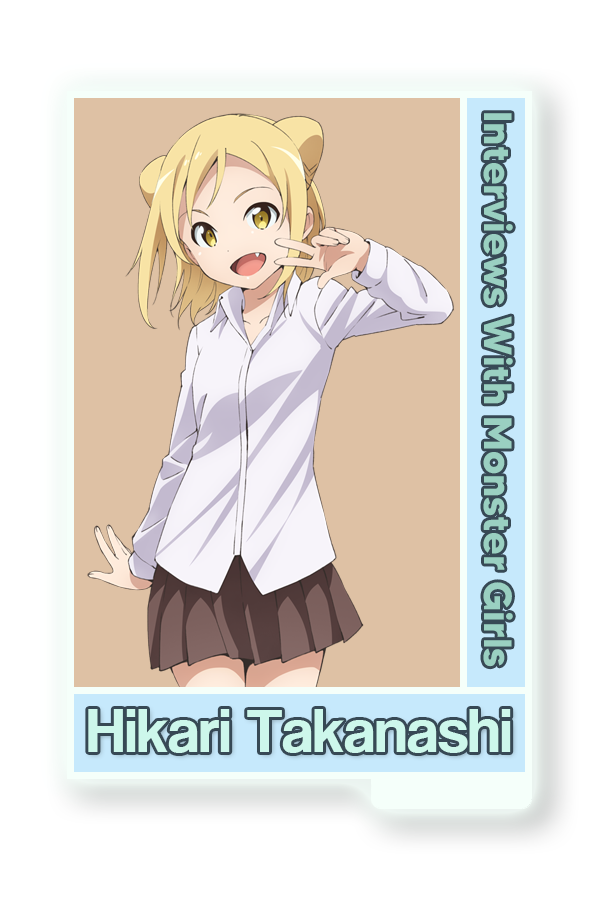
<style>
.page{position:relative;width:600px;height:900px;background:#dec1a4}
.page>*{position:absolute;margin:0}
.t1{font:39.2px "MADETOMMY-Bold";color:#9ad0c1}
.t2{font:64.4px "CoolveticaRg-Regular";color:#cdf7eb}
</style>
<div class="page">
<p class="t1" style="left:483px;top:113px;width:30px;height:554px;rotate:90deg">Interviews With Monster Girls</p>
<p class="t2" style="left:88px;top:709px;width:423px;height:44px">Hikari Takanashi</p>
</div>
